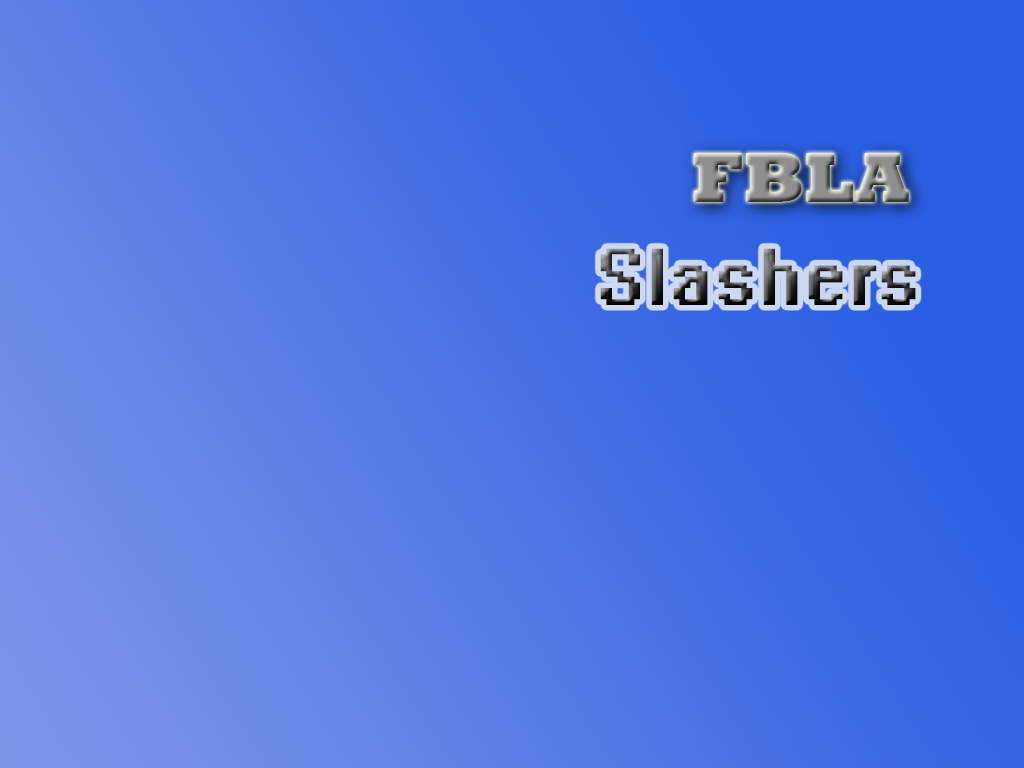
<style>
.page{position:relative;width:1024px;height:768px}
.page>*{position:absolute;margin:0}
.t1{font:72px "Rockwell-ExtraBold"}
.t2{font:72px "System"}
</style>
<div class="page">
<p class="t1" style="left:693px;top:153px;width:216px;height:49px">FBLA</p>
<p class="t2" style="left:600px;top:248px;width:316px;height:57px">Slashers</p>
</div>
